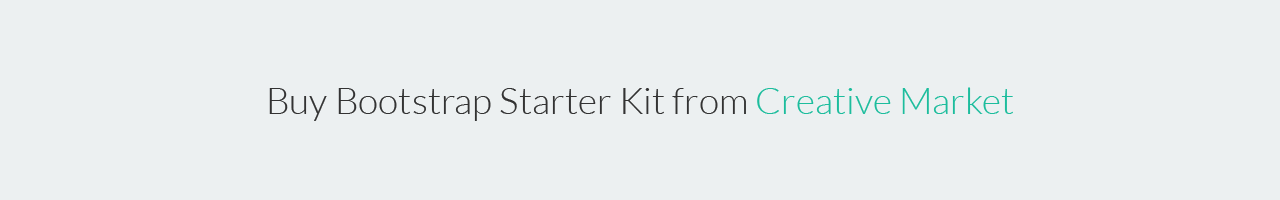
<style>
.page{position:relative;width:1280px;height:200px;background:#ecf0f1}
.page>*{position:absolute;margin:0}
.t1{font:37px "Lato-Light";color:#333333}
.t2{font:37px "Lato-Light";color:#1dbd9d}
</style>
<div class="page">
<p class="t1" style="left:269px;top:87px;width:744px;height:34px">Buy Bootstrap Starter Kit from <span class="t2">Creative Market</span></p>
</div>
